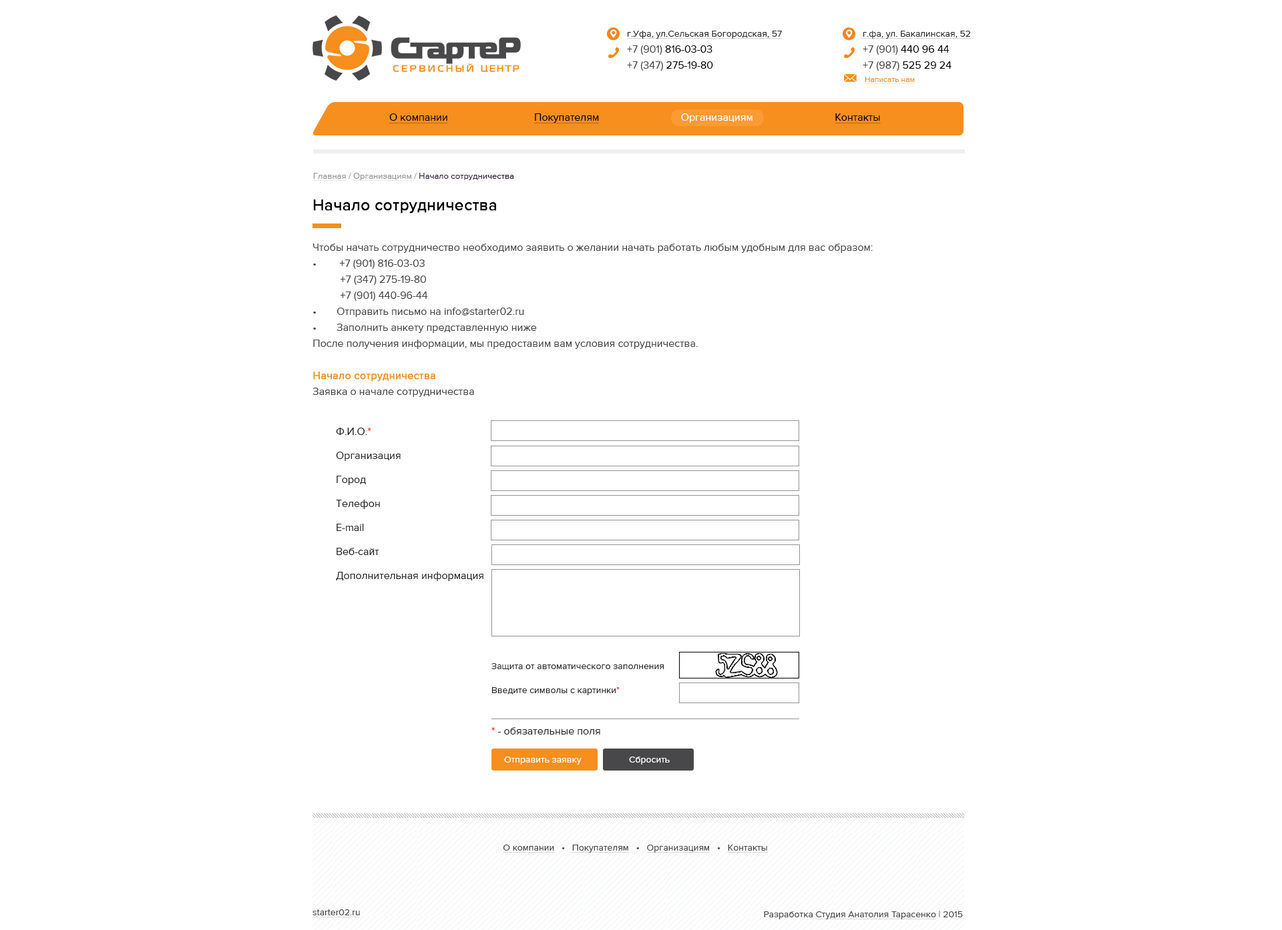
<style>
.page{position:relative;width:1282px;height:930px;background:#ffffff}
.page>*{position:absolute;margin:0}
.t1{font:9.3px/16px "amlgjlahnkgmkjoldgbpeifodofplkkf";color:#282828;text-decoration:underline}
.t2{font:10.7px/16px "amlgjlahnkgmkjoldgbpeifodofplkkf";color:#48484a}
.t3{font:10.7px/16px "amlgjlahnkgmkjoldgbpeifodofplkkf";color:#000000}
.t4{font:8px "amlgjlahnkgmkjoldgbpeifodofplkkf";color:#f68f1e;text-decoration:underline}
.t5{font:10.7px "amlgjlahnkgmkjoldgbpeifodofplkkf";color:#000000;text-decoration:underline}
.t6{font:10.7px "amlgjlahnkgmkjoldgbpeifodofplkkf";color:#ffffff}
.t7{font:8.7px "amlgjlahnkgmkjoldgbpeifodofplkkf";color:#2c1a37}
.t8{font:8.7px "amlgjlahnkgmkjoldgbpeifodofplkkf";color:#969696;text-decoration:underline}
.t9{font:8.7px "amlgjlahnkgmkjoldgbpeifodofplkkf";color:#969696}
.t10{font:16px "amlgjlahnkgmkjoldgbpeifodofplkkf";color:#010101;font-weight:bold}
.t11{font:10.7px/16px "amlgjlahnkgmkjoldgbpeifodofplkkf";color:#f68f1e;font-weight:bold}
.t12{font:10.7px/24px "amlgjlahnkgmkjoldgbpeifodofplkkf";color:#282828}
.t13{font:10.7px/24px "amlgjlahnkgmkjoldgbpeifodofplkkf";color:#ff0000}
.t14{font:9.3px/24px "amlgjlahnkgmkjoldgbpeifodofplkkf";color:#282828}
.t15{font:9.3px/24px "amlgjlahnkgmkjoldgbpeifodofplkkf";color:#fe0000}
.t16{font:10.7px "amlgjlahnkgmkjoldgbpeifodofplkkf";color:#282828}
.t17{font:10.7px "amlgjlahnkgmkjoldgbpeifodofplkkf";color:#ff0000}
.t18{font:9.3px "amlgjlahnkgmkjoldgbpeifodofplkkf";color:#ffffff}
.t19{font:9.3px "amlgjlahnkgmkjoldgbpeifodofplkkf";color:#48484a;text-decoration:underline}
.t20{font:9.3px "amlgjlahnkgmkjoldgbpeifodofplkkf";color:#48484a}
</style>
<div class="page">
<p class="t1" style="left:627px;top:31px;width:155px;height:40px">г.Уфа, ул.Сельская Богородская, 57<br><span class="t2">+7 (901)</span><span class="t3"> 816-03-03<br></span><span class="t2">+7 (347)</span><span class="t3"> 275-19-80</span></p>
<p class="t1" style="left:862px;top:31px;width:109px;height:40px">г.фа, ул. Бакалинская, 52<br><span class="t2">+7 (901)</span><span class="t3"> 440 96 44<br></span><span class="t2">+7 (987)</span><span class="t3"> 525 29 24</span></p>
<p class="t4" style="left:864px;top:77px;width:51px;height:7px">Написать нам</p>
<p class="t5" style="left:388px;top:113px;width:60px;height:10px">О компании</p>
<p class="t6" style="left:534px;top:113px;width:346px;height:10px"><span class="t5">Покупателям      </span>Организациям      <span class="t5">Контакты</span></p>
<p class="t7" style="left:313px;top:173px;width:201px;height:8px"><span class="t8">Главная</span><span class="t9"> / </span><span class="t8">Организациям</span><span class="t9"> /</span> Начало сотрудничества</p>
<p class="t10" style="left:313px;top:200px;width:183px;height:14px">Начало сотрудничества</p>
<p class="t2" style="left:312px;top:244px;width:560px;height:153px">Чтобы начать сотрудничество необходимо заявить о желании начать работать любым удобным для вас образом: <br>•  +7 (901) 816-03-03<br>          +7 (347) 275-19-80<br>          +7 (901) 440-96-44<br>• Отправить письмо на info@starter02.ru<br>• Заполнить анкету представленную ниже<br>После получения информации, мы предоставим вам условия сотрудничества.<br><span class="t11"><br>Начало сотрудничества<br></span>Заявка о начале сотрудничества</p>
<p class="t12" style="left:336px;top:428px;width:147px;height:153px">Ф.И.О.<span class="t13">*<br></span>Организация<br>Город<br>Телефон<br>E-mail<br>Веб-сайт<br>Дополнительная информация</p>
<p class="t14" style="left:491px;top:663px;width:172px;height:33px">Защита от автоматического заполнения<br>Введите символы с картинки<span class="t15">*</span></p>
<p class="t16" style="left:491px;top:728px;width:109px;height:7px"><span class="t17">*</span> - обязательные поля</p>
<p class="t18" style="left:504px;top:757px;width:77px;height:8px">Отправить заявку</p>
<p class="t18" style="left:629px;top:757px;width:40px;height:8px">Сбросить</p>
<p class="t19" style="left:503px;top:845px;width:265px;height:8px">О компании<span class="t20">   •   </span>Покупателям<span class="t20">   •   </span>Организациям<span class="t20">   •   </span>Контакты</p>
<p class="t19" style="left:312px;top:910px;width:48px;height:8px">starter02.ru</p>
<p class="t19" style="left:764px;top:911px;width:198px;height:9px"><span class="t20">Разработка </span>Студия Анатолия Тарасенко<span class="t20"> | 2015</span></p>
</div>
